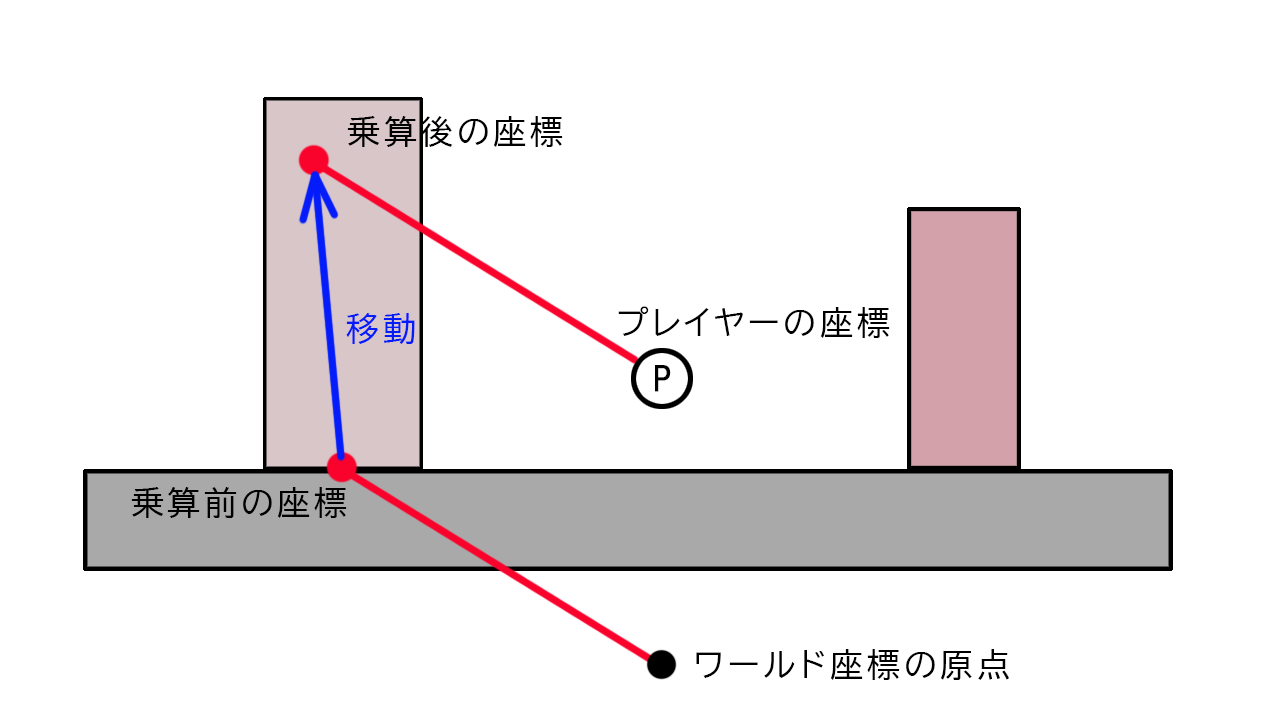
<style>
.page{position:relative;width:1280px;height:720px;background:#ffffff}
.page>*{position:absolute;margin:0}
.t1{font:33.3px "BIZ-UDPGothic";letter-spacing:0.1em;color:#000000}
.t2{font:33.3px "BIZ-UDPGothic";letter-spacing:0.1em;color:#031cf9}
.t3{font:33.3px "HGPGothicE";letter-spacing:0.1em;color:#000000}
</style>
<div class="page">
<p class="t1" style="left:347px;top:116px;width:216px;height:31px">乗算後の座標</p>
<p class="t2" style="left:346px;top:313px;width:69px;height:31px">移動</p>
<p class="t1" style="left:618px;top:306px;width:272px;height:32px">プレイヤーの座標</p>
<p class="t3" style="left:655px;top:365px;width:16px;height:27px">P</p>
<p class="t1" style="left:131px;top:487px;width:216px;height:31px">乗算前の座標</p>
<p class="t1" style="left:696px;top:649px;width:313px;height:31px">ワールド座標の原点</p>
</div>
